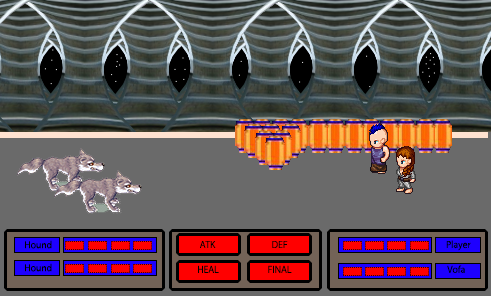
<style>
.page{position:relative;width:491px;height:296px;background:#6a6a6a}
.page>*{position:absolute;margin:0}
.t1{font:9px "KozGoPr6N-Regular";color:#000000}
</style>
<div class="page">
<p class="t1" style="left:25px;top:240px;width:27px;height:9px">Hound</p>
<p class="t1" style="left:200px;top:241px;width:16px;height:7px">ATK</p>
<p class="t1" style="left:272px;top:241px;width:16px;height:7px">DEF</p>
<p class="t1" style="left:446px;top:240px;width:25px;height:11px">Player</p>
<p class="t1" style="left:25px;top:263px;width:27px;height:9px">Hound</p>
<p class="t1" style="left:198px;top:265px;width:21px;height:8px">HEAL</p>
<p class="t1" style="left:268px;top:265px;width:24px;height:8px">FINAL</p>
<p class="t1" style="left:447px;top:265px;width:18px;height:8px">Vofa</p>
</div>
